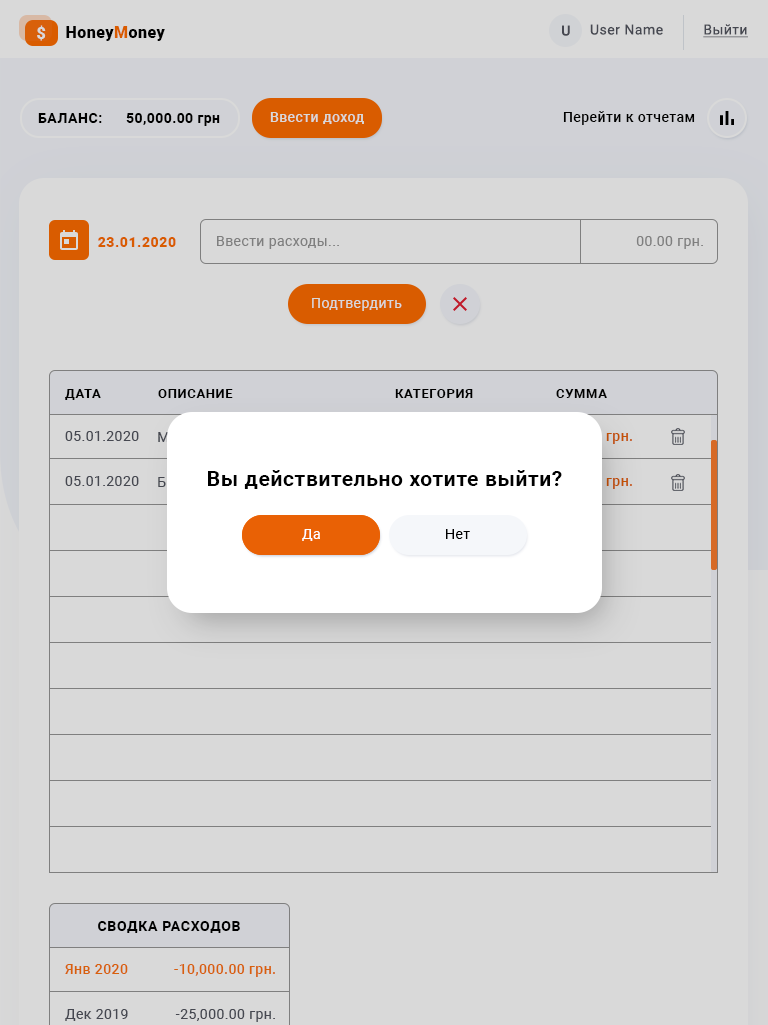
<style>
.page{position:relative;width:768px;height:1025px;background:#d9d9d9}
.page>*{position:absolute;margin:0}
.t1{font:16px "Roboto-Black";letter-spacing:0.03em;color:#d9d9d9}
.t2{font:16px "Roboto-Black";letter-spacing:0.03em;color:#000000}
.t3{font:16px "Roboto-Black";letter-spacing:0.03em;color:#ff6c00}
.t4{font:14px "Roboto-Medium";letter-spacing:0.035em;color:#52555f}
.t5{font:14px "Roboto-Regular";letter-spacing:0.035em;color:#52555f}
.t6{font:14px "Roboto-Regular";letter-spacing:0.03em;color:#52555f;text-decoration:underline}
.t7{font:14px "Roboto-Bold";letter-spacing:0.04em;color:#000000;text-transform:uppercase}
.t8{font:14px "Roboto-Bold";letter-spacing:0.03em;color:#000000}
.t9{font:14px "Roboto-Medium";letter-spacing:0.03em;color:#d9d9d9}
.t10{font:14px "Roboto-Medium";letter-spacing:0.03em;color:#000000}
.t11{font:14px "Roboto-Black";letter-spacing:0.04em;color:#d95c00}
.t12{font:14px "Roboto-Regular";letter-spacing:0.03em;color:#959595}
.t13{font:14px "Roboto-Regular";letter-spacing:0.03em;color:#d9d9d9}
.t14{font:13px "Roboto-Bold";letter-spacing:0.05em;color:#000000;text-transform:uppercase}
.t15{font:14px "Roboto-Regular";letter-spacing:0.03em;color:#52555f}
.t16{font:14px "Roboto-Medium";letter-spacing:0.03em}
.t17{font:21px "Roboto-Bold";letter-spacing:0.03em;color:#000000}
.t18{font:14px "Roboto-Regular";letter-spacing:0.03em;color:#ffffff}
.t19{font:14px "Roboto-Regular";letter-spacing:0.03em;color:#000000}
.t20{font:14px "Roboto-Bold";letter-spacing:0.05em;color:#000000;text-transform:uppercase}
.t21{font:14px "Roboto-Medium";letter-spacing:0.03em;color:#d8600b}
</style>
<div class="page">
<p class="t1" style="left:37px;top:25px;width:9px;height:16px">$</p>
<p class="t2" style="left:66px;top:26px;width:99px;height:15px">Honey<span class="t3">M</span>oney</p>
<p class="t4" style="left:562px;top:25px;width:8px;height:11px">U</p>
<p class="t5" style="left:590px;top:24px;width:73px;height:11px">User Name</p>
<p class="t6" style="left:703px;top:24px;width:45px;height:14px">Выйти</p>
<p class="t7" style="left:38px;top:113px;width:64px;height:10px">баланс:</p>
<p class="t8" style="left:126px;top:113px;width:94px;height:13px">50,000.00 грн</p>
<p class="t9" style="left:270px;top:112px;width:94px;height:12px">Ввести доход</p>
<p class="t10" style="left:563px;top:111px;width:132px;height:14px">Перейти к отчетам</p>
<p class="t11" style="left:98px;top:237px;width:78px;height:10px">23.01.2020</p>
<p class="t12" style="left:217px;top:236px;width:122px;height:13px">Ввести расходы...</p>
<p class="t12" style="left:636px;top:236px;width:67px;height:13px">00.00 грн.</p>
<p class="t13" style="left:312px;top:298px;width:90px;height:13px">Подтвердить</p>
<p class="t14" style="left:65px;top:389px;width:36px;height:11px">Дата</p>
<p class="t14" style="left:158px;top:389px;width:75px;height:9px">Описание</p>
<p class="t14" style="left:395px;top:389px;width:78px;height:9px">Категория</p>
<p class="t14" style="left:556px;top:389px;width:51px;height:9px">Сумма</p>
<p class="t15" style="left:65px;top:431px;width:74px;height:10px">05.01.2020</p>
<p class="t16" style="left:555px;top:431px;width:77px;height:13px">- 30.00 грн.</p>
<p class="t17" style="left:208px;top:470px;width:354px;height:19px">Вы действительно хотите выйти?</p>
<p class="t15" style="left:65px;top:476px;width:74px;height:10px">05.01.2020</p>
<p class="t18" style="left:302px;top:529px;width:18px;height:12px">Да</p>
<p class="t18" style="left:302px;top:529px;width:18px;height:12px">Да</p>
<p class="t19" style="left:446px;top:529px;width:24px;height:10px">Нет</p>
<p class="t20" style="left:98px;top:921px;width:142px;height:12px">Сводка расходов</p>
<p class="t21" style="left:65px;top:964px;width:63px;height:10px">Янв 2020</p>
<p class="t21" style="left:174px;top:964px;width:101px;height:13px">-10,000.00 грн.</p>
<p class="t15" style="left:65px;top:1009px;width:63px;height:12px">Дек 2019</p>
<p class="t15" style="left:175px;top:1009px;width:100px;height:13px">-25,000.00 грн.</p>
</div>
